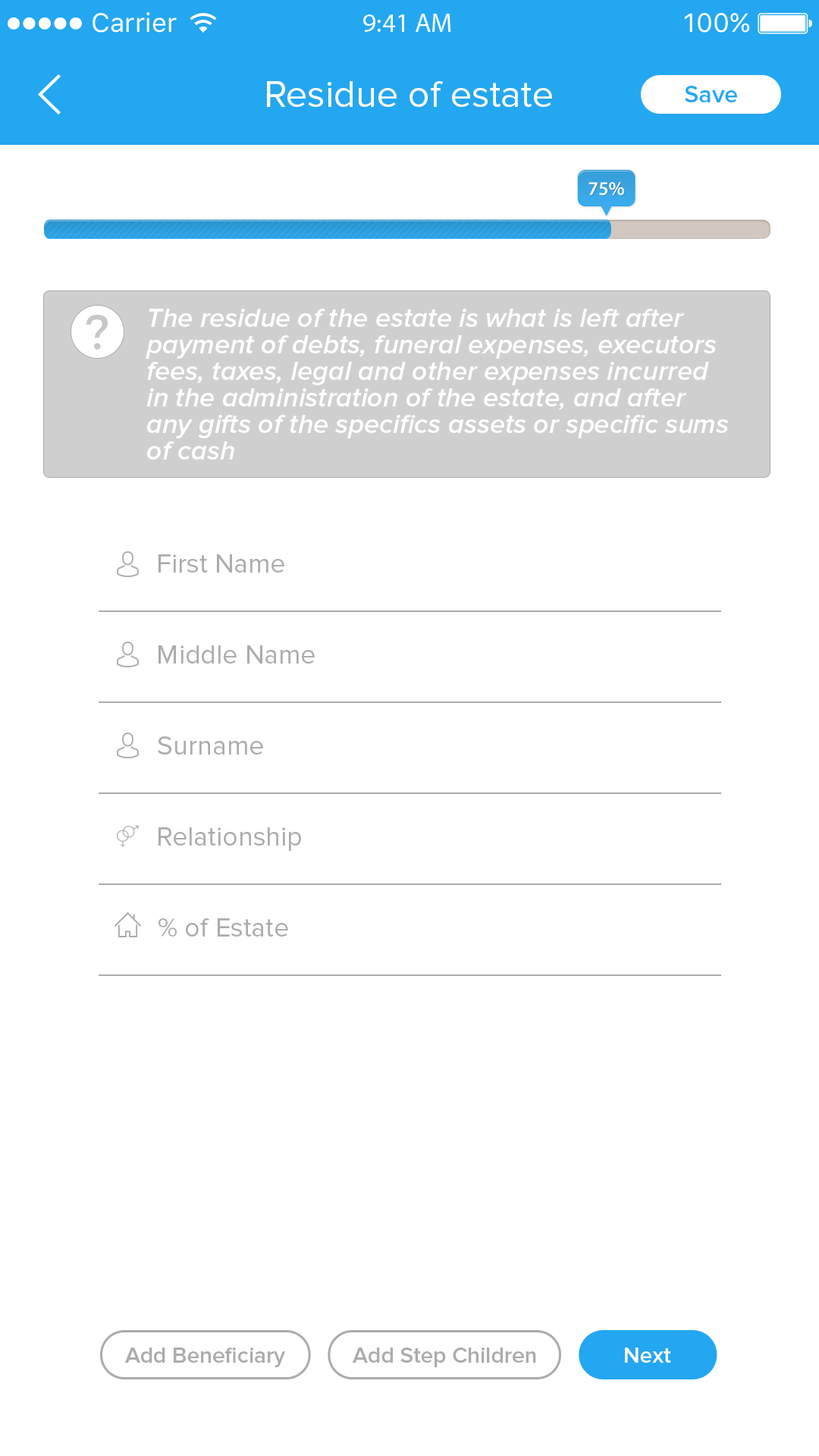
<style>
.page{position:relative;width:819px;height:1456px;background:#ffffff}
.page>*{position:absolute;margin:0}
.t1{font:38.1px "ProximaNova-Regular";color:#ffffff}
.t2{font:24.7px "ProximaNova-Semibold";color:#23a7f1}
.t3{font:19.2px "MyriadPro-Semibold";color:#ffffff}
.t4{font:48.9px "Montserrat-Regular";color:#c7c7c7;scale:1.05 1}
.t5{font:27.2px/26.5px "ProximaNova-SemiboldIt";color:#ffffff}
.t6{font:27.3px "ProximaNova-Regular";color:#ababad}
.t7{font:22.7px "ProximaNova-Semibold";color:#ababad}
.t8{font:22.7px "ProximaNova-Semibold";color:#ffffff}
</style>
<div class="page">
<p class="t1" style="left:267px;top:81px;width:285px;height:26px">Residue of estate</p>
<p class="t2" style="left:685px;top:86px;width:52px;height:16px">Save</p>
<p class="t3" style="left:588px;top:182px;width:36px;height:14px">75%</p>
<p class="t4" style="left:86px;top:315px;width:22px;height:35px">?</p>
<p class="t5" style="left:146px;top:309px;width:583px;height:151px">The residue of the estate is what is left after <br>payment of debts, funeral expenses, executors <br>fees, taxes, legal and other expenses incurred <br>in the administration of the estate, and after <br>any gifts of the specifics assets or specific sums <br>of cash</p>
<p class="t6" style="left:158px;top:554px;width:126px;height:19px">First Name</p>
<p class="t6" style="left:158px;top:645px;width:157px;height:19px">Middle Name</p>
<p class="t6" style="left:158px;top:736px;width:105px;height:19px">Surname</p>
<p class="t6" style="left:158px;top:827px;width:143px;height:24px">Relationship</p>
<p class="t6" style="left:158px;top:918px;width:130px;height:19px">% of Estate</p>
<p class="t7" style="left:125px;top:1347px;width:160px;height:20px">Add Beneficiary</p>
<p class="t7" style="left:353px;top:1348px;width:183px;height:19px">Add Step Children</p>
<p class="t8" style="left:625px;top:1348px;width:46px;height:15px">Next</p>
</div>
